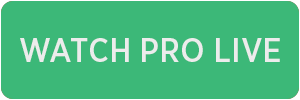
<style>
.page{position:relative;width:300px;height:100px;background:#3cb878}
.page>*{position:absolute;margin:0}
.t1{font:32px "GothamNarrowSSm-Medium";color:#ececec}
</style>
<div class="page">
<p class="t1" style="left:20px;top:38px;width:260px;height:24px">WATCH PRO LIVE</p>
</div>
